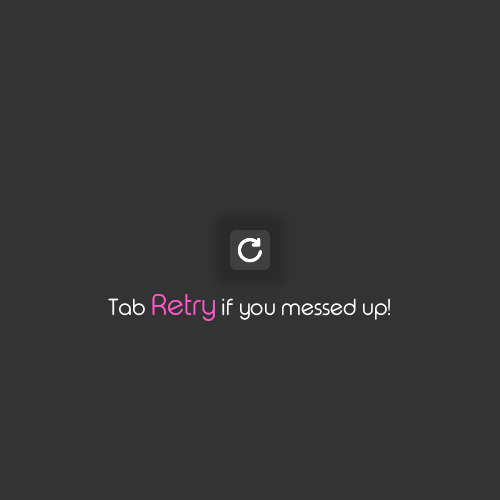
<style>
.page{position:relative;width:500px;height:500px;background:#333333}
.page>*{position:absolute;margin:0}
.t1{font:23px "TypoRoundLightDemo";color:#ffffff}
.t2{font:30px "TypoRoundLightDemo";color:#fe59c6}
</style>
<div class="page">
<p class="t1" style="left:108px;top:294px;width:282px;height:27px">Tab <span class="t2">Retry</span> if you messed up!</p>
</div>
